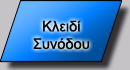
<style>
.page{position:relative;width:130px;height:70px}
.page>*{position:absolute;margin:0}
.t1{font:14.7px "ArialMT";color:#000000}
</style>
<div class="page">
<p class="t1" style="left:33px;top:20px;width:56px;height:30px;text-align:center">Κλειδί<br>Συνόδου</p>
</div>
